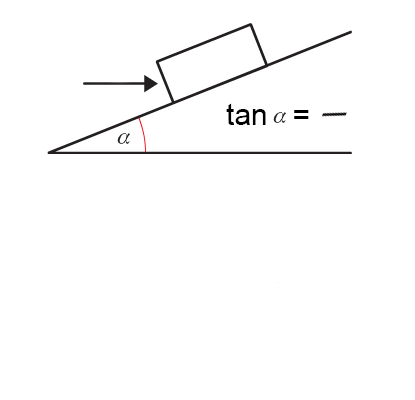
<style>
.page{position:relative;width:415px;height:400px;background:#ffffff}
.page>*{position:absolute;margin:0}
.t1{font:30px "ArialMT";color:#000000}
</style>
<div class="page">
<p class="t1" style="left:226px;top:103px;width:83px;height:22px">tan   =</p>
</div>
